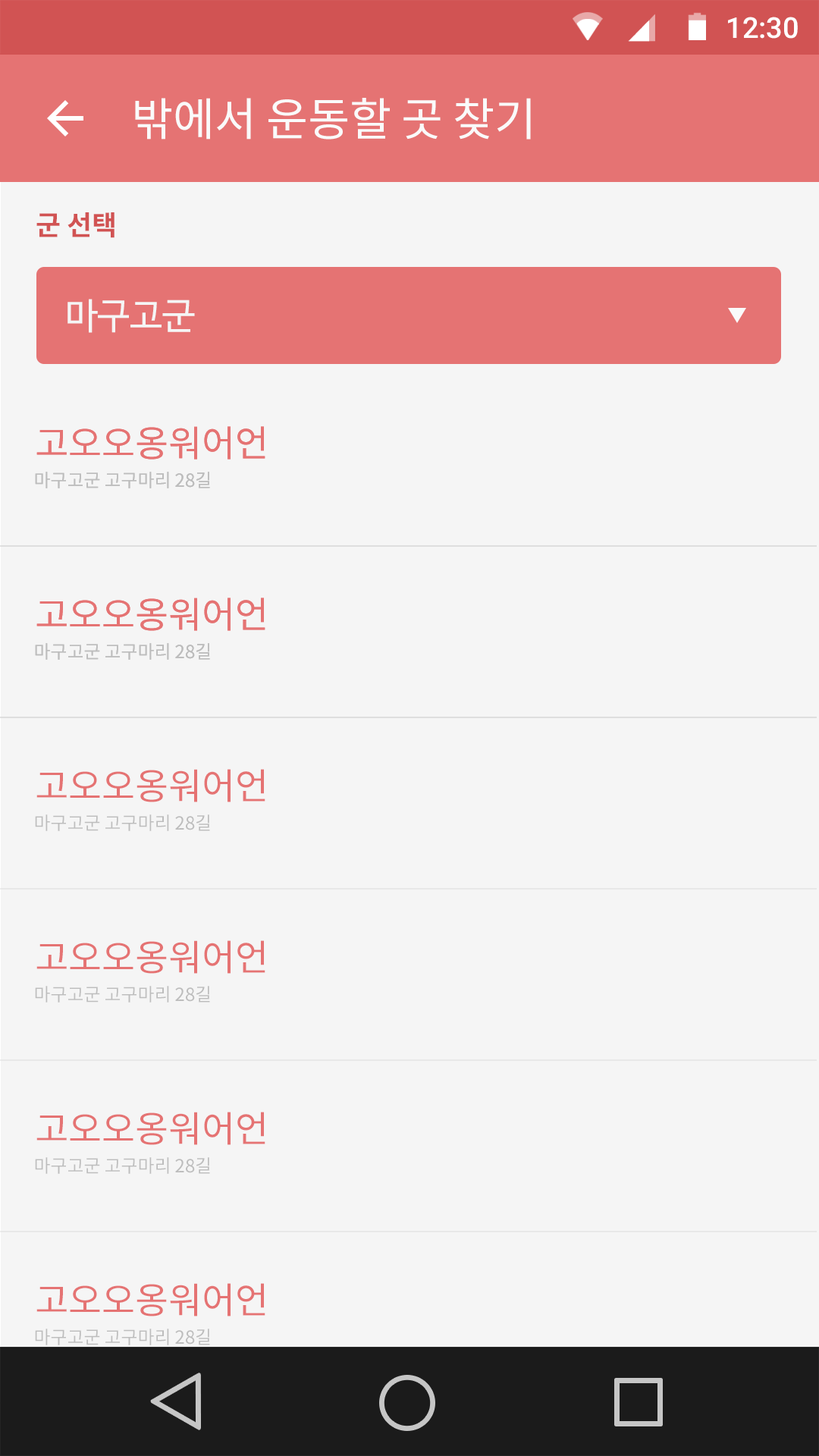
<style>
.page{position:relative;width:819px;height:1456px;background:#f5f5f5}
.page>*{position:absolute;margin:0}
.t1{font:28.8px "Roboto-Medium";color:#ffffff}
.t2{font:45.5px "NotoSansCJKkr-Regular";letter-spacing:-0.005em;color:#fafafa}
.t3{font:27.3px "NotoSansCJKkr-Bold";color:#d15353}
.t4{font:36.4px "NanumBarunGothic";color:#f5f5f5}
.t5{font:36.4px "NotoSansCJKkr-Regular";letter-spacing:-0.005em;color:#e57373}
.t6{font:18.2px "NotoSansCJKkr-Regular";letter-spacing:-0.005em;color:#bdbdbd}
</style>
<div class="page">
<p class="t1" style="left:728px;top:17px;width:70px;height:22px">12:30</p>
<p class="t2" style="left:135px;top:98px;width:396px;height:42px">밖에서 운동할 곳 찾기</p>
<p class="t3" style="left:36px;top:212px;width:79px;height:26px">군 선택</p>
<p class="t4" style="left:67px;top:299px;width:128px;height:34px">마구고군</p>
<p class="t5" style="left:36px;top:426px;width:229px;height:34px">고오오옹워어언</p>
<p class="t5" style="left:36px;top:426px;width:229px;height:34px">고오오옹워어언</p>
<p class="t6" style="left:35px;top:472px;width:175px;height:16px">마구고군 고구마리 28길</p>
<p class="t6" style="left:35px;top:472px;width:175px;height:16px">마구고군 고구마리 28길</p>
<p class="t5" style="left:36px;top:598px;width:229px;height:33px">고오오옹워어언</p>
<p class="t5" style="left:36px;top:598px;width:229px;height:33px">고오오옹워어언</p>
<p class="t6" style="left:35px;top:643px;width:175px;height:17px">마구고군 고구마리 28길</p>
<p class="t6" style="left:35px;top:643px;width:175px;height:17px">마구고군 고구마리 28길</p>
<p class="t5" style="left:36px;top:769px;width:229px;height:33px">고오오옹워어언</p>
<p class="t6" style="left:35px;top:814px;width:175px;height:17px">마구고군 고구마리 28길</p>
<p class="t5" style="left:36px;top:940px;width:229px;height:34px">고오오옹워어언</p>
<p class="t6" style="left:35px;top:986px;width:175px;height:17px">마구고군 고구마리 28길</p>
<p class="t5" style="left:36px;top:1112px;width:229px;height:33px">고오오옹워어언</p>
<p class="t6" style="left:35px;top:1157px;width:175px;height:17px">마구고군 고구마리 28길</p>
<p class="t5" style="left:36px;top:1283px;width:229px;height:33px">고오오옹워어언</p>
<p class="t6" style="left:35px;top:1329px;width:175px;height:16px">마구고군 고구마리 28길</p>
</div>
